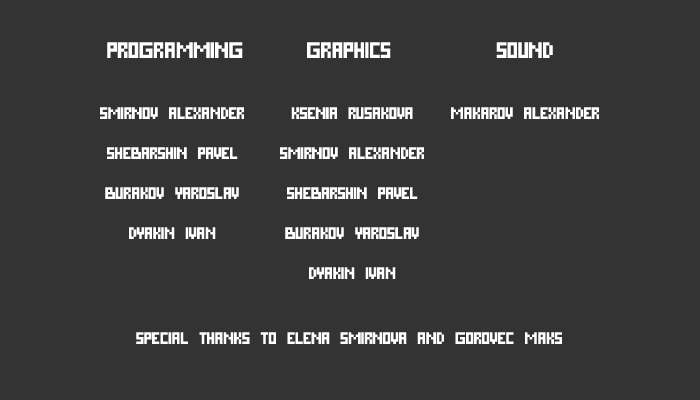
<style>
.page{position:relative;width:700px;height:400px;background:#333333}
.page>*{position:absolute;margin:0}
.t1{font:22.5px "PixelCyr-Normal";color:#ffffff}
.t2{font:16.7px "PixelCyr-Normal";color:#ffffff}
</style>
<div class="page">
<p class="t1" style="left:107px;top:42px;width:136px;height:16px">PROGRAMMING</p>
<p class="t1" style="left:307px;top:42px;width:84px;height:16px">GRAPHICS</p>
<p class="t1" style="left:496px;top:42px;width:57px;height:16px">SOUND</p>
<p class="t2" style="left:100px;top:107px;width:144px;height:132px;text-align:center">SMIRNOV ALEXANDER<br><br>SHEBARSHIN PAVEL<br><br>BURAKOV YAROSLAV<br><br>DYAKIN IVAN</p>
<p class="t2" style="left:280px;top:107px;width:144px;height:172px;text-align:center">KSENIA RUSAKOVA<br><br>SMIRNOV ALEXANDER<br><br>SHEBARSHIN PAVEL<br><br>BURAKOV YAROSLAV<br><br>DYAKIN IVAN</p>
<p class="t2" style="left:451px;top:107px;width:148px;height:12px">MAKAROV ALEXANDER</p>
<p class="t2" style="left:136px;top:332px;width:426px;height:12px">SPECIAL THANKS TO ELENA SMIRNOVA AND GOROVEC MAKS</p>
</div>
